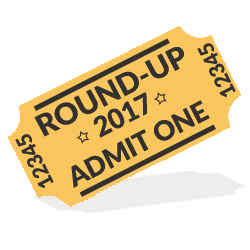
<style>
.page{position:relative;width:250px;height:250px;background:#ffffff}
.page>*{position:absolute;margin:0}
.t1{font:30px "Lato-Black";letter-spacing:-0.01em;color:#323130}
.t2{font:20.5px "Lato-Black";letter-spacing:-0.01em;color:#323130}
.t3{font:27.1px "Lato-Black";letter-spacing:-0.01em;color:#323130}
</style>
<div class="page">
<p class="t1" style="left:34px;top:47px;width:150px;height:90px;rotate:-27deg">ROUND-UP</p>
<p class="t2" style="left:197px;top:43px;width:39px;height:55px;rotate:-117deg">12345</p>
<p class="t3" style="left:71px;top:92px;width:139px;height:96px;text-align:center;rotate:-27deg">2017<br>ADMIT ONE</p>
<p class="t2" style="left:15px;top:134px;width:39px;height:55px;rotate:-117deg">12345</p>
</div>
